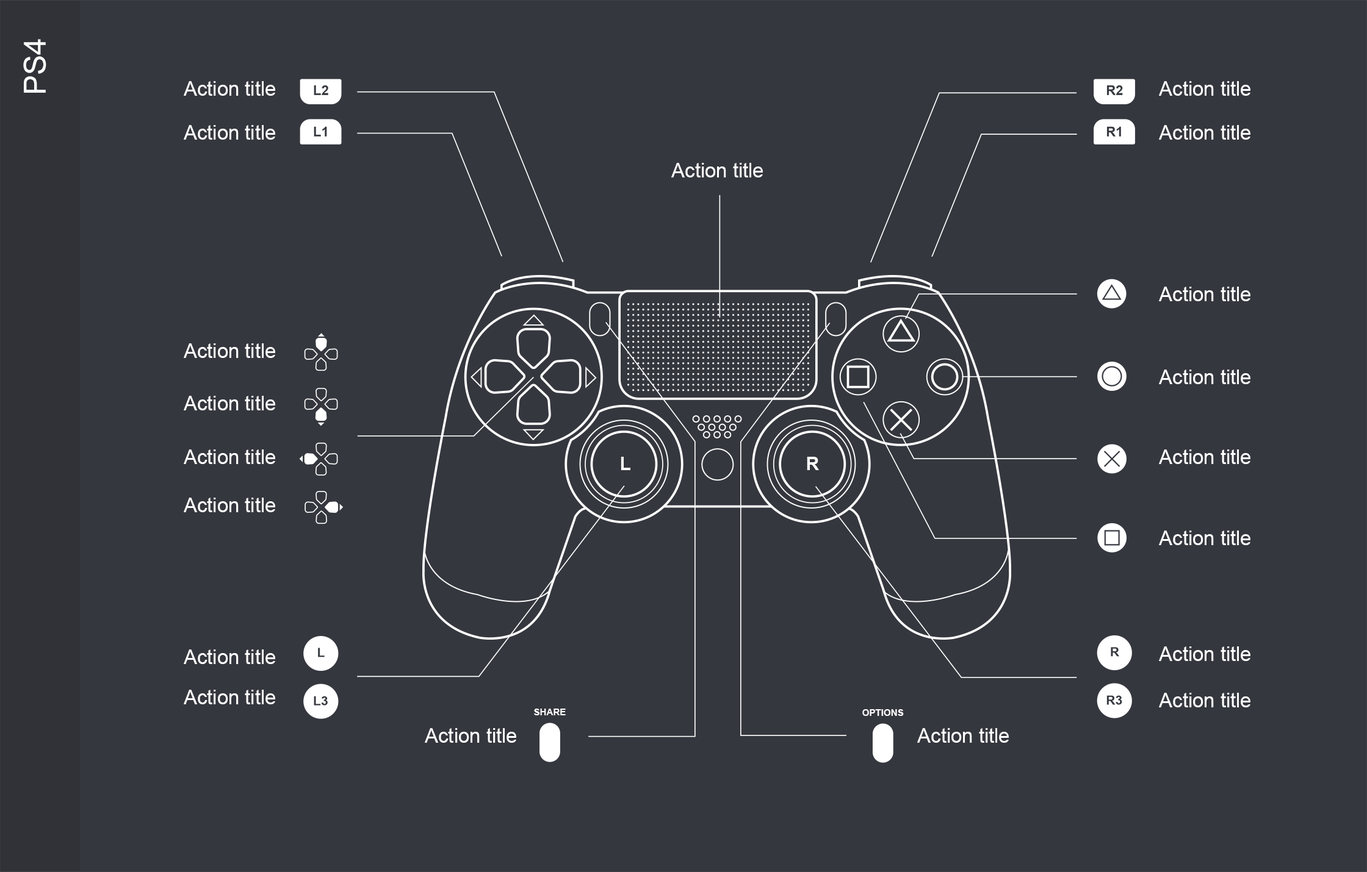
<style>
.page{position:relative;width:1367px;height:872px;background:#35373e}
.page>*{position:absolute;margin:0}
.t1{font:30.5px "ArialMT";color:#ffffff}
.t2{font:20px "ArialMT";color:#ffffff}
.t3{font:9.3px "Arial-BoldMT";color:#ffffff}
</style>
<div class="page">
<p class="t1" style="left:23px;top:39px;width:23px;height:54px;rotate:-90deg">PS4</p>
<p class="t2" style="left:184px;top:81px;width:91px;height:15px">Action title</p>
<p class="t2" style="left:1159px;top:81px;width:91px;height:15px">Action title</p>
<p class="t2" style="left:184px;top:125px;width:91px;height:15px">Action title</p>
<p class="t2" style="left:1159px;top:125px;width:91px;height:15px">Action title</p>
<p class="t2" style="left:671px;top:163px;width:92px;height:15px">Action title</p>
<p class="t2" style="left:1159px;top:287px;width:91px;height:14px">Action title</p>
<p class="t2" style="left:184px;top:344px;width:91px;height:14px">Action title</p>
<p class="t2" style="left:1159px;top:370px;width:91px;height:14px">Action title</p>
<p class="t2" style="left:184px;top:396px;width:91px;height:15px">Action title</p>
<p class="t2" style="left:184px;top:450px;width:91px;height:14px">Action title</p>
<p class="t2" style="left:1159px;top:450px;width:91px;height:14px">Action title</p>
<p class="t2" style="left:184px;top:498px;width:91px;height:15px">Action title</p>
<p class="t2" style="left:1159px;top:531px;width:91px;height:14px">Action title</p>
<p class="t2" style="left:184px;top:650px;width:91px;height:14px">Action title</p>
<p class="t2" style="left:1159px;top:647px;width:91px;height:14px">Action title</p>
<p class="t2" style="left:184px;top:690px;width:91px;height:15px">Action title</p>
<p class="t2" style="left:1159px;top:693px;width:91px;height:15px">Action title</p>
<p class="t3" style="left:534px;top:709px;width:32px;height:7px">SHARE</p>
<p class="t3" style="left:862px;top:710px;width:42px;height:6px">OPTIONS</p>
<p class="t2" style="left:425px;top:728px;width:91px;height:15px">Action title</p>
<p class="t2" style="left:917px;top:728px;width:92px;height:15px">Action title</p>
</div>
